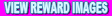
<style>
.page{position:relative;width:112px;height:16px}
.page>*{position:absolute;margin:0}
.t1{font:14.7px "Arial-Black";color:#d6f7ff;scale:0.55 1}
</style>
<div class="page">
<p class="t1" style="left:4px;top:2px;width:104px;height:11px">VIEW REWARD IMAGES</p>
</div>
